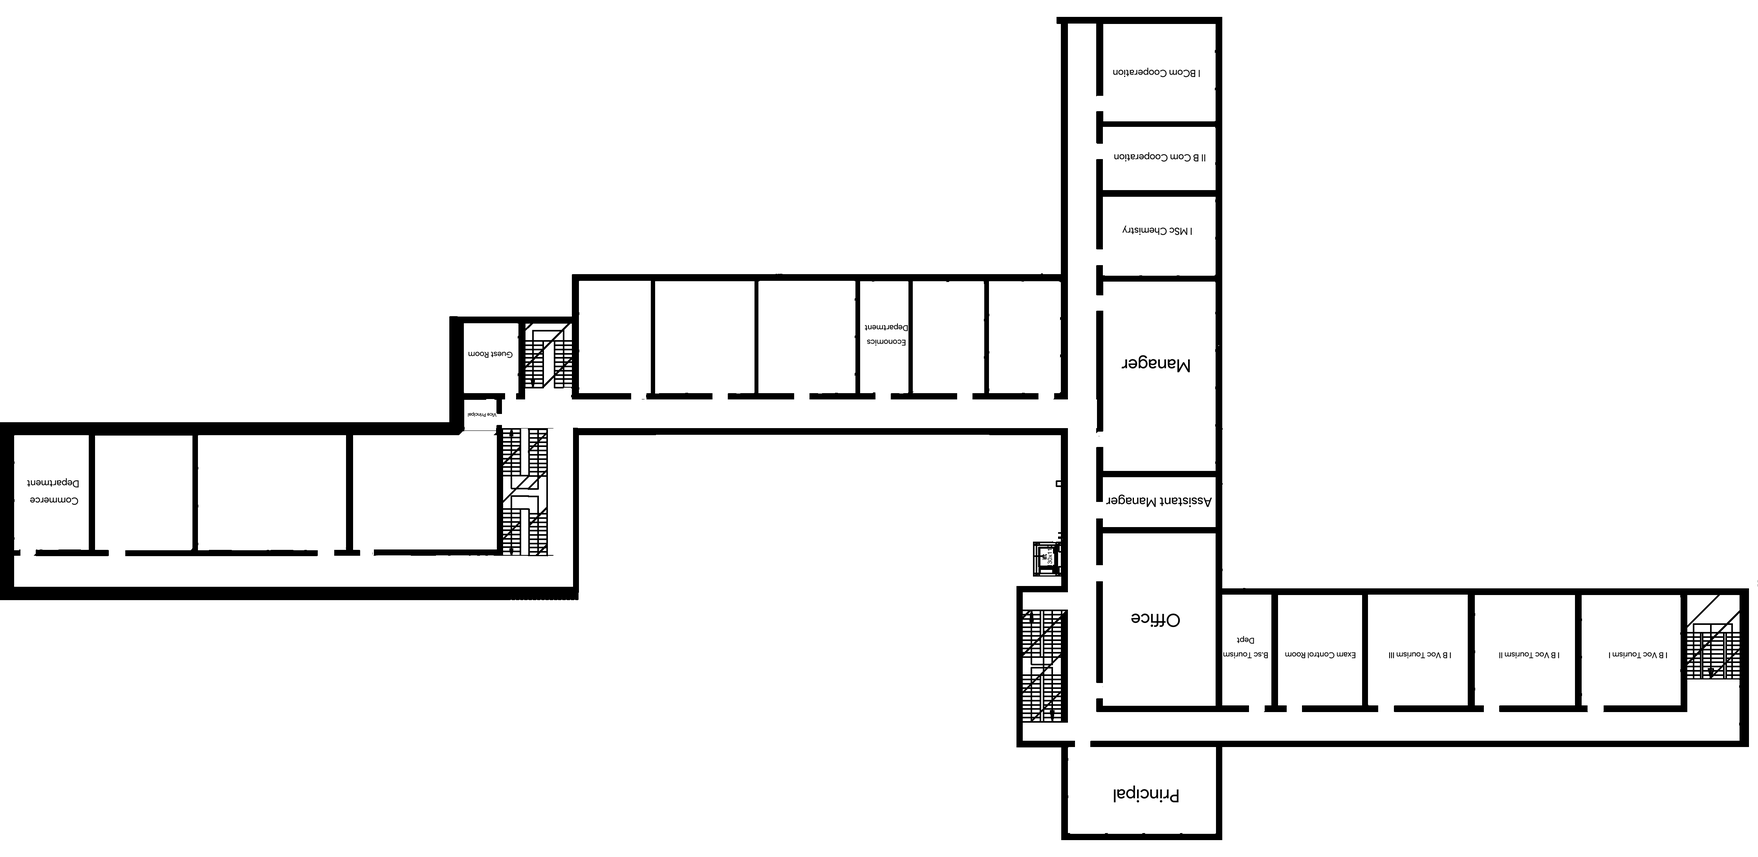
<style>
.page{position:relative;width:1758px;height:857px;background:#ffffff}
.page>*{position:absolute;margin:0}
.t1{font:9.8px "ProductSans-Regular";color:#000000}
.t2{font:8.2px "ProductSans-Regular";color:#000000}
.t3{font:18px "ProductSans-Regular";color:#000000}
.t4{font:4.9px "ProductSans-Regular";color:#000000}
.t5{font:13.1px "ProductSans-Regular";color:#000000}
</style>
<div class="page">
<p class="t1" style="left:1113px;top:68px;width:87px;height:9px;rotate:180deg">I BCom Cooperation</p>
<p class="t1" style="left:1114px;top:152px;width:91px;height:10px;rotate:180deg">II B Com Cooperation</p>
<p class="t1" style="left:1122px;top:225px;width:70px;height:10px;rotate:180deg">I MSc Chemistry</p>
<p class="t2" style="left:865px;top:323px;width:43px;height:23px;text-align:center;rotate:180deg">Economics<br> Department</p>
<p class="t2" style="left:468px;top:351px;width:45px;height:7px;rotate:180deg">Guest Room</p>
<p class="t3" style="left:1121px;top:355px;width:69px;height:17px;rotate:180deg">Manager</p>
<p class="t4" style="left:468px;top:412px;width:28px;height:5px;rotate:180deg">Vice Principal</p>
<p class="t1" style="left:27px;top:478px;width:52px;height:27px;text-align:center;rotate:180deg">Commerce<br> Department</p>
<p class="t5" style="left:1106px;top:494px;width:106px;height:13px;rotate:180deg">Assistant Manager</p>
<p class="t3" style="left:1131px;top:613px;width:49px;height:14px;rotate:-180deg">Office</p>
<p class="t2" style="left:1223px;top:636px;width:45px;height:22px;text-align:center;rotate:-180deg">B.sc Tourism<br>Dept</p>
<p class="t2" style="left:1285px;top:652px;width:70px;height:7px;rotate:-180deg">Exam Control Room</p>
<p class="t2" style="left:1389px;top:652px;width:62px;height:7px;rotate:-180deg">I B Voc Tourism III</p>
<p class="t2" style="left:1499px;top:652px;width:60px;height:6px;rotate:-180deg">I B Voc Tourism II</p>
<p class="t2" style="left:1609px;top:652px;width:58px;height:7px;rotate:-180deg">I B Voc Tourism I</p>
<p class="t3" style="left:1114px;top:785px;width:65px;height:17px;rotate:-180deg">Principal</p>
</div>
